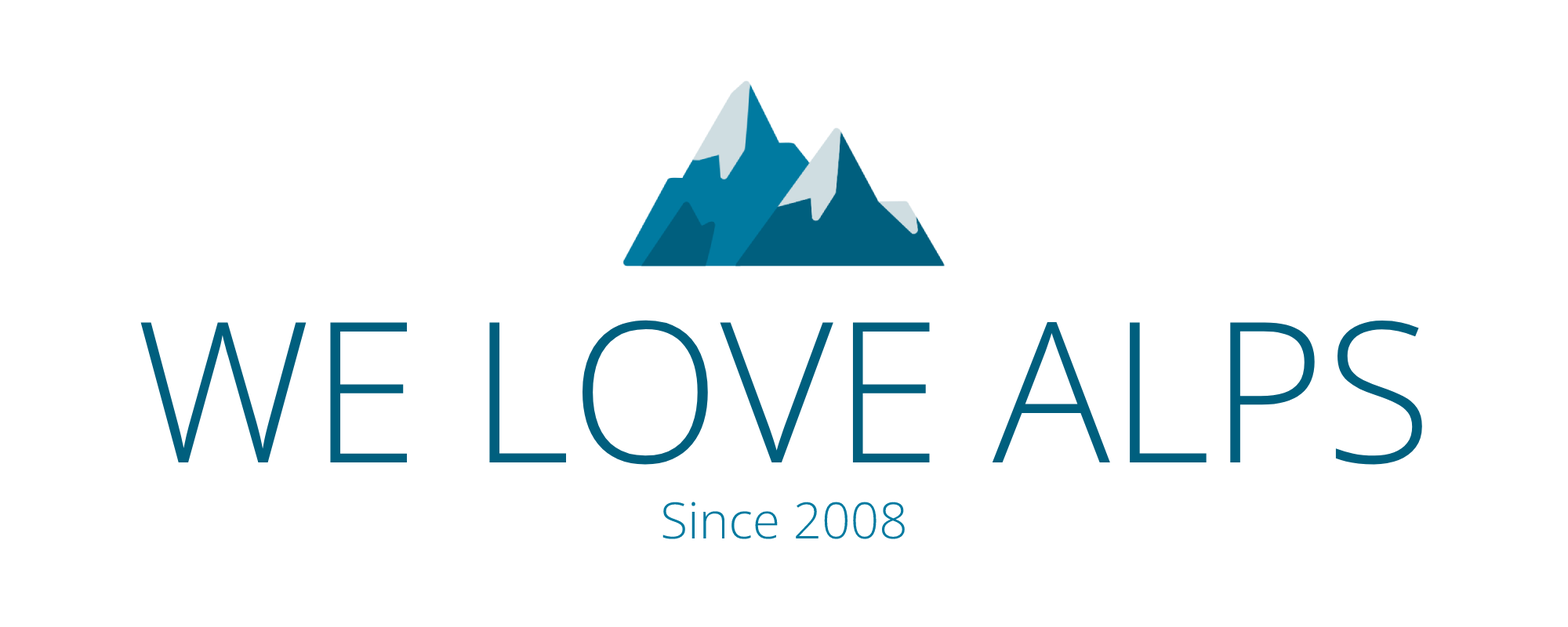
<style>
.page{position:relative;width:1568px;height:627px;background:#ffffff}
.page>*{position:absolute;margin:0}
.t1{font:196px "OpenSans-Light";color:#005f7e}
.t2{font:50.2px "OpenSans-Light";color:#007aa0}
</style>
<div class="page">
<p class="t1" style="left:140px;top:320px;width:1282px;height:219px;text-align:center">WE LOVE ALPS<br><span class="t2">Since 2008</span></p>
</div>
